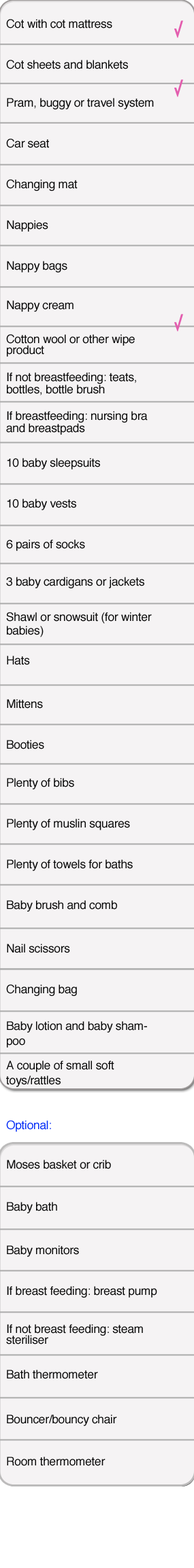
<style>
.page{position:relative;width:194px;height:1568px;background:#f5f3f4}
.page>*{position:absolute;margin:0}
.t1{font:11.9px/20.4px "Helvetica";letter-spacing:-0.02em;color:#070707}
.t2{font:11.9px/6.1px "Helvetica";letter-spacing:-0.02em;color:#070707}
.t3{font:11.9px/19px "Helvetica";letter-spacing:-0.02em;color:#070707}
.t4{font:11.9px/13.6px "Helvetica";letter-spacing:-0.02em;color:#070707}
.t5{font:11.9px/9.5px "Helvetica";letter-spacing:-0.02em;color:#070707}
.t6{font:11.9px/10.9px "Helvetica";letter-spacing:-0.02em;color:#070707}
.t7{font:11.9px/8.8px "Helvetica";letter-spacing:-0.02em;color:#070707}
.t8{font:11.9px/12.2px "Helvetica";letter-spacing:-0.02em;color:#070707}
.t9{font:11.9px/11.5px "Helvetica";letter-spacing:-0.02em;color:#070707}
.t10{font:11.9px/17.7px "Helvetica";letter-spacing:-0.02em;color:#070707}
.t11{font:11.9px/14.9px "Helvetica";letter-spacing:-0.02em;color:#070707}
.t12{font:11.9px/21.7px "Helvetica";letter-spacing:-0.02em;color:#070707}
.t13{font:11.9px/18.3px "Helvetica";letter-spacing:-0.02em;color:#070707}
.t14{font:11.9px/14.9px "Helvetica";letter-spacing:-0.02em;color:#0029f7}
.t15{font:11.9px/21.1px "Helvetica";letter-spacing:-0.02em;color:#070707}
.t16{font:11.9px/10.2px "Helvetica";letter-spacing:-0.02em;color:#070707}
.t17{font:11.9px/15.6px "Helvetica";letter-spacing:-0.02em;color:#070707}
</style>
<div class="page">
<p class="t1" style="left:6px;top:19px;width:151px;height:1447px"><span class="t2"><br>Cot with cot mattress<br></span><br>Cot sheets and blankets<br><span class="t3"><br>Pram, buggy or travel system<br></span><br>Car seat<br><br>Changing mat  <br><br>Nappies<br><span class="t4"><br><br>Nappy bags<br><br><br>Nappy cream<br><br></span><span class="t5"><br>Cotton wool or other wipe </span><span class="t6">product <br></span><span class="t7"><br><br>If not breastfeeding: teats, </span><span class="t8">bottles, bottle brush<br></span><span class="t7"><br><br>If breastfeeding: nursing bra </span><span class="t8">and breastpads <br></span><span class="t9"><br><br>10 baby sleepsuits<br></span><span class="t4"><br><br>10 baby vests<br><br><br>6 pairs of socks<br><br></span>3 baby cardigans or jackets<br><span class="t10"><br>Shawl or snowsuit (for winter </span><span class="t4">babies)<br></span><span class="t11"><br>Hats<br></span><span class="t12"><br>Mittens<br></span><br>Booties<br><span class="t3"><br>Plenty of bibs<br></span><br>Plenty of muslin squares<br><br>Plenty of towels for baths<br><br>Baby brush and comb <br><span class="t12"><br>Nail scissors<br></span><br>Changing bag<br><span class="t13"><br>Baby lotion and baby sham</span><span class="t11">poo<br></span><span class="t8"><br>A couple of small soft </span><span class="t11">toys/rattles<br><br></span><span class="t14"><br>Optional:<br><br><br></span><span class="t8">Moses basket or crib <br></span><span class="t15"><br>Baby bath<br><br></span><span class="t11"><br>Baby monitors<br></span><span class="t4"><br><br>If breast feeding: breast pump<br><br></span><span class="t6"><br>If not breast feeding: steam steriliser<br><br></span><span class="t16"><br>Bath thermometer<br><br></span><span class="t17"><br>Bouncer/bouncy chair<br><br></span><span class="t4"><br>Room thermometer</span></p>
</div>
